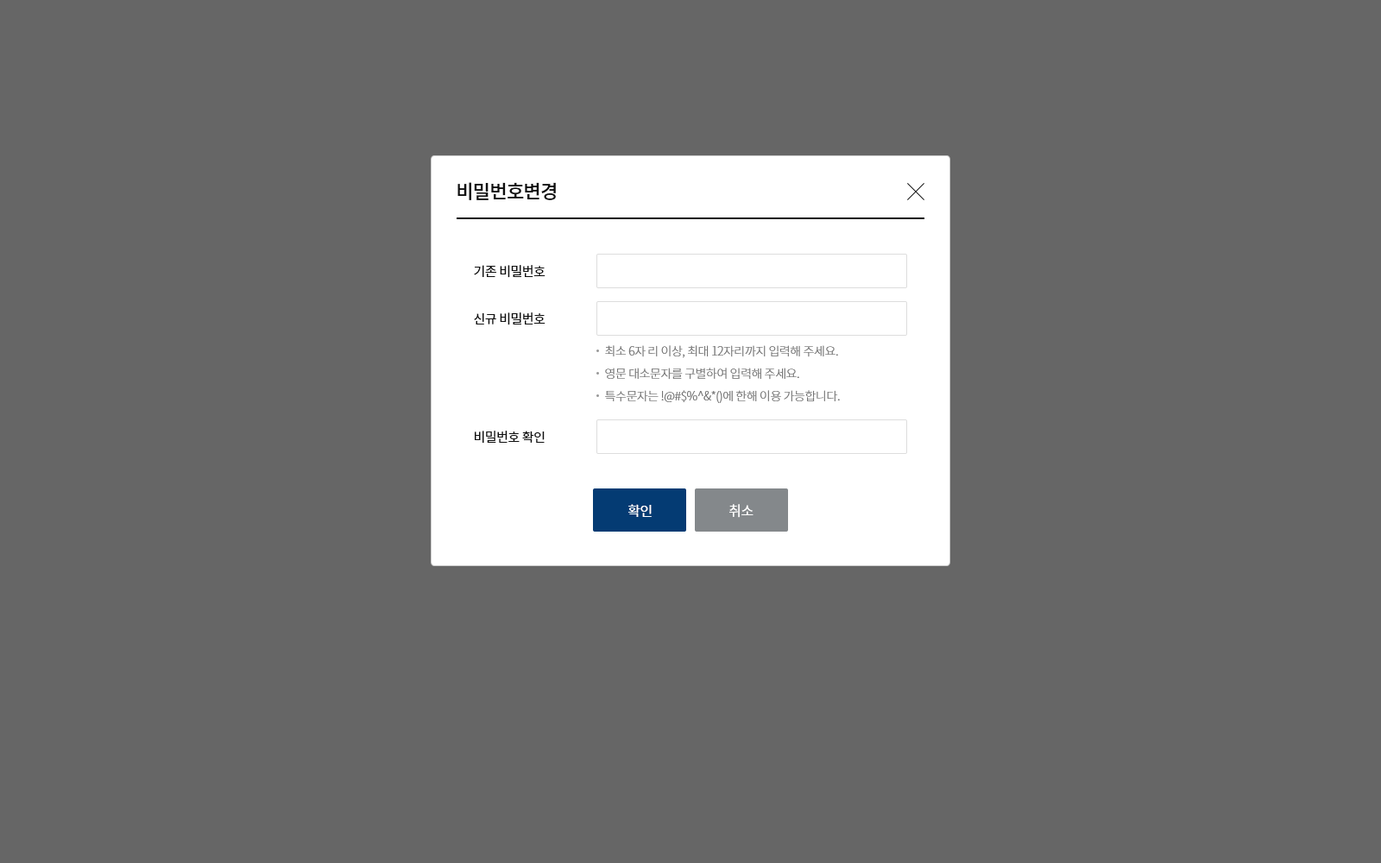
<style>
.page{position:relative;width:1381px;height:863px;background:#666666}
.page>*{position:absolute;margin:0}
.t1{font:19px "NotoSansCJKkr-Medium";letter-spacing:-0.03em;color:#0f0f0f}
.t2{font:12.9px/47.5px "NotoSansCJKkr-Regular";letter-spacing:-0.03em;color:#0f0f0f}
.t3{font:12.1px/22.4px "NotoSansCJKkr-Light";letter-spacing:-0.03em;color:#757575}
.t4{font:12.9px "NotoSansCJKkr-Regular";letter-spacing:-0.03em;color:#0f0f0f}
.t5{font:13.8px "NotoSansCJKkr-Regular";letter-spacing:-0.03em;color:#ffffff}
</style>
<div class="page">
<p class="t1" style="left:458px;top:182px;width:98px;height:18px">비밀번호변경</p>
<p class="t2" style="left:474px;top:265px;width:72px;height:60px">기존 비밀번호<br>신규 비밀번호</p>
<p class="t3" style="left:605px;top:345px;width:235px;height:58px">최소 6자 리 이상, 최대 12자리까지 입력해 주세요.<br>영문 대소문자를 구별하여 입력해 주세요.<br>특수문자는 !@#$%^&amp;*()에 한해 이용 가능합니다.</p>
<p class="t4" style="left:475px;top:431px;width:70px;height:13px">비밀번호 확인</p>
<p class="t5" style="left:628px;top:504px;width:24px;height:13px">확인</p>
<p class="t5" style="left:729px;top:504px;width:25px;height:14px">취소</p>
</div>
